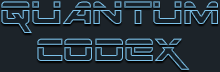
<style>
.page{position:relative;width:220px;height:72px;background:#1c2329}
.page>*{position:absolute;margin:0}
.t1{font:44.7px "SpaceRangerLaser"}
.t2{font:44.2px "SpaceRangerLaser"}
</style>
<div class="page">
<p class="t1" style="left:1px;top:1px;width:217px;height:32px">QUANTUM</p>
<p class="t2" style="left:37px;top:38px;width:153px;height:32px">CODEX</p>
</div>
